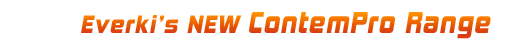
<style>
.page{position:relative;width:530px;height:43px;background:#ffffff}
.page>*{position:absolute;margin:0}
.t1{font:28.6px "KimberleyBl-Regular";letter-spacing:0.05em;font-style:italic;scale:0.91 1}
.t2{font:23px "KimberleyBl-Regular";letter-spacing:0.05em;font-style:italic}
</style>
<div class="page">
<p class="t1" style="left:81px;top:11px;width:410px;height:28px"><span class="t2">Everki’s NEW </span>ContemPro Range</p>
</div>
